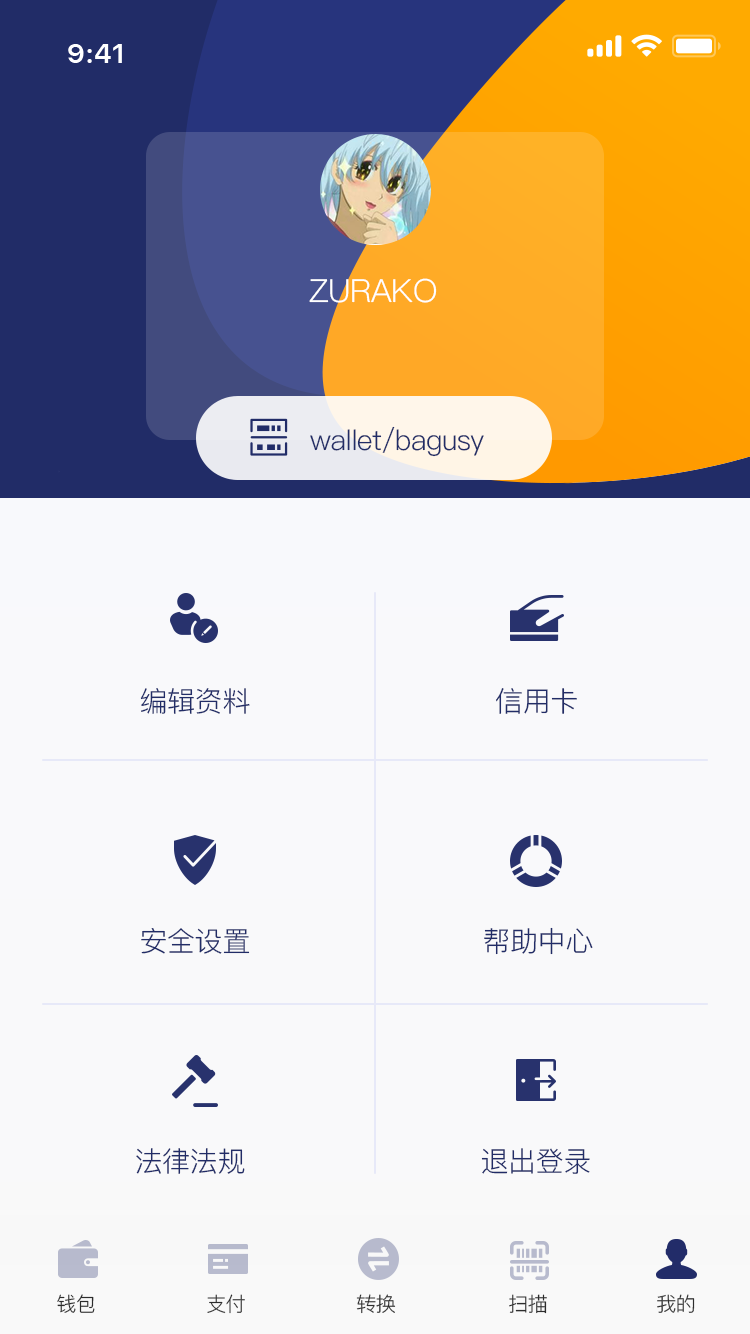
<style>
.page{position:relative;width:750px;height:1334px;background:#f9f9fa}
.page>*{position:absolute;margin:0}
.t1{font:28px "SFProText-Semibold";letter-spacing:-0.012em;color:#ffffff}
.t2{font:28px "SFProText-Semibold";color:#ffffff}
.t3{font:32px "PingFang-SC-Regular";letter-spacing:-0.013em;color:#ffffff}
.t4{font:28px "PingFang-SC-Regular";letter-spacing:-0.013em;color:#212c67}
.t5{font:20px "PingFang-SC-Regular";letter-spacing:-0.014em;color:#2d2d2d}
</style>
<div class="page">
<p class="t1" style="left:68px;top:44px;width:54px;height:19px">9:4<span class="t2">1</span></p>
<p class="t3" style="left:309px;top:278px;width:128px;height:25px">ZURAKO</p>
<p class="t4" style="left:310px;top:426px;width:174px;height:31px">wallet/bagusy</p>
<p class="t4" style="left:140px;top:688px;width:110px;height:26px">编辑资料</p>
<p class="t4" style="left:496px;top:688px;width:81px;height:26px">信用卡</p>
<p class="t4" style="left:141px;top:928px;width:109px;height:26px">安全设置</p>
<p class="t4" style="left:484px;top:927px;width:109px;height:28px">帮助中心</p>
<p class="t4" style="left:136px;top:1148px;width:109px;height:26px">法律法规</p>
<p class="t4" style="left:481px;top:1148px;width:109px;height:26px">退出登录</p>
<p class="t5" style="left:57px;top:1294px;width:38px;height:19px">钱包</p>
<p class="t5" style="left:207px;top:1294px;width:38px;height:20px">支付</p>
<p class="t5" style="left:356px;top:1294px;width:40px;height:20px">转换</p>
<p class="t5" style="left:509px;top:1294px;width:38px;height:20px">扫描</p>
<p class="t5" style="left:657px;top:1294px;width:38px;height:19px">我的</p>
</div>
